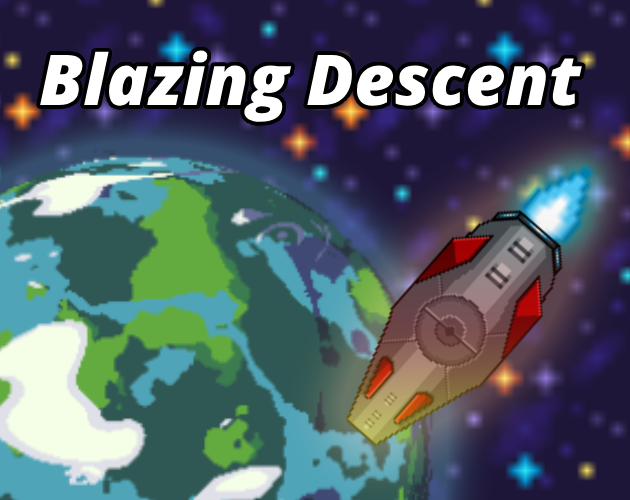
<style>
.page{position:relative;width:630px;height:500px}
.page>*{position:absolute;margin:0}
.t1{font:70px "OpenSans-ExtraboldItalic";color:#ffffff}
</style>
<div class="page">
<p class="t1" style="left:40px;top:50px;width:542px;height:72px">Blazing Descent</p>
</div>
